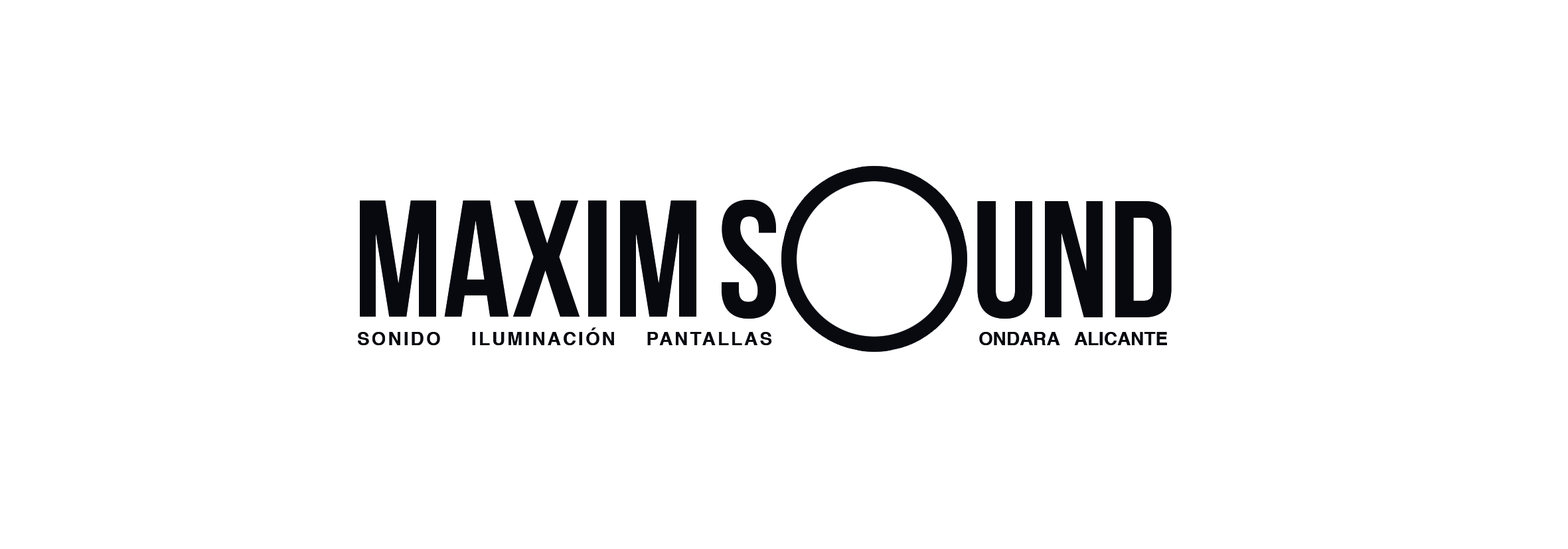
<style>
.page{position:relative;width:1568px;height:549px;background:#ffffff}
.page>*{position:absolute;margin:0}
.t1{font:166px "BebasNeue";color:#08090e}
.t2{font:18.6px "Helvetica-Bold";letter-spacing:0.11em;color:#08090e}
.t3{font:18.6px "Helvetica-Bold";color:#08090e}
</style>
<div class="page">
<p class="t1" style="left:360px;top:200px;width:336px;height:117px">MAXIM</p>
<p class="t1" style="left:722px;top:200px;width:450px;height:119px">S        UND</p>
<p class="t2" style="left:358px;top:327px;width:414px;height:18px">SONIDO    ILUMINACIÓN    PANTALLAS</p>
<p class="t3" style="left:979px;top:332px;width:188px;height:13px">ONDARA   ALICANTE</p>
</div>
